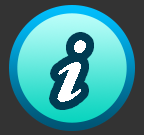
<style>
.page{position:relative;width:144px;height:135px;background:#333333}
.page>*{position:absolute;margin:0}
.t1{font:95.8px "AGaramondPro-BoldItalic";letter-spacing:0.1em;color:#ffffff}
</style>
<div class="page">
<p class="t1" style="left:57px;top:40px;width:29px;height:62px">i</p>
</div>
